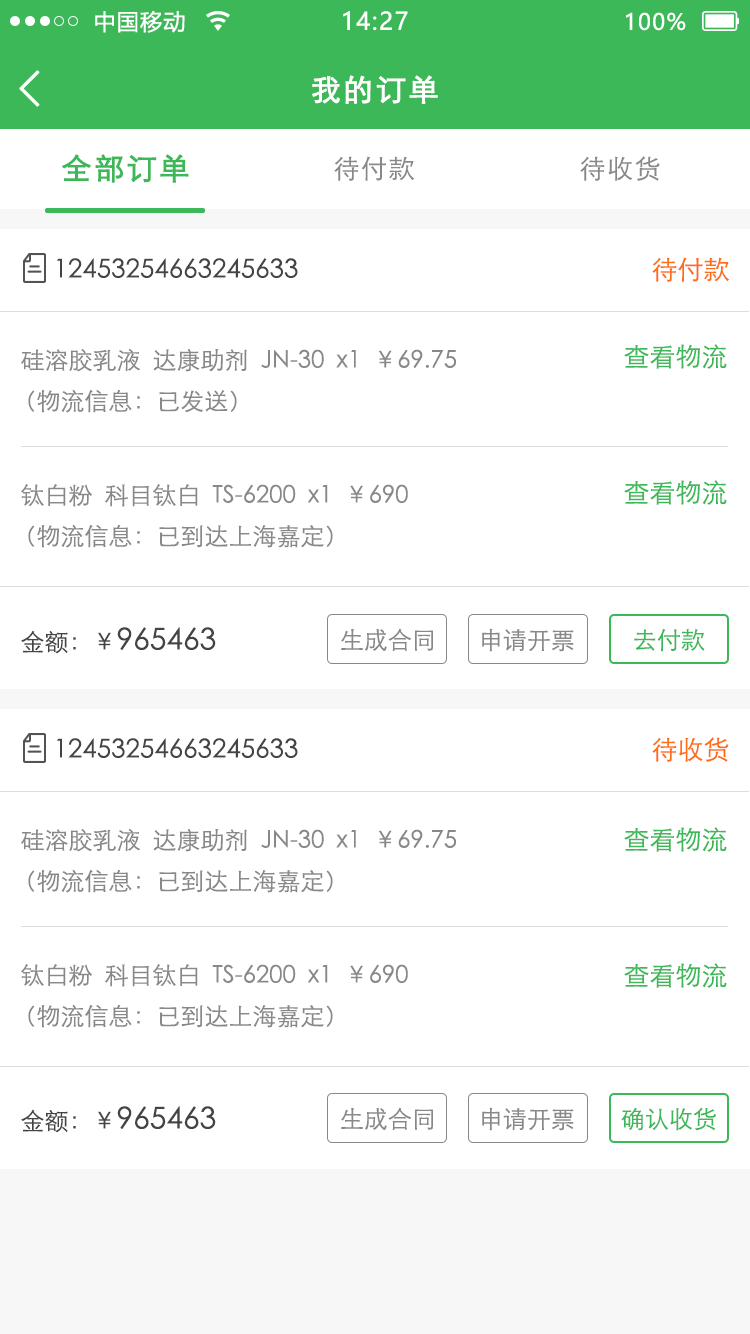
<style>
.page{position:relative;width:750px;height:1334px;background:#ffffff}
.page>*{position:absolute;margin:0}
.t1{font:22px "MicrosoftYaHei";letter-spacing:0.06em;color:#ffffff}
.t2{font:24px "MicrosoftYaHei";letter-spacing:0.06em;color:#ffffff}
.t3{font:49.8px "NSimSun";letter-spacing:0.06em;color:#fefffe;font-weight:bold}
.t4{font:30px "STXihei";letter-spacing:0.06em;color:#fefffe;font-weight:bold}
.t5{font:30px "STXihei";letter-spacing:0.06em;color:#3db858;font-weight:bold}
.t6{font:26px "STXihei";letter-spacing:0.06em;color:#888888}
.t7{font:26px "STXihei";color:#ff6e17}
.t8{font:26px "STXihei";color:#444444}
.t9{font:24px "STXihei";color:#888888}
.t10{font:26px "STXihei";color:#3db858}
.t11{font:30px "STXihei";color:#444444}
.t12{font:24px "STXihei";color:#444444}
.t13{font:24px "STXihei";color:#3db858}
</style>
<div class="page">
<p class="t1" style="left:95px;top:10px;width:90px;height:23px">中国移动</p>
<p class="t2" style="left:343px;top:11px;width:65px;height:20px">14:27</p>
<p class="t1" style="left:626px;top:12px;width:60px;height:19px">100%</p>
<p class="t3" style="left:19px;top:70px;width:21px;height:37px">&lt;</p>
<p class="t4" style="left:312px;top:75px;width:126px;height:29px">我的订单</p>
<p class="t5" style="left:62px;top:154px;width:127px;height:29px">全部订单</p>
<p class="t6" style="left:334px;top:156px;width:80px;height:25px">待付款</p>
<p class="t6" style="left:580px;top:156px;width:80px;height:25px">待收货</p>
<p class="t7" style="left:652px;top:257px;width:77px;height:25px">待付款</p>
<p class="t8" style="left:57px;top:258px;width:241px;height:20px">12453254663245633</p>
<p class="t9" style="left:21px;top:348px;width:435px;height:24px">硅溶胶乳液  达康助剂  JN-30  x1  ￥69.75</p>
<p class="t10" style="left:624px;top:344px;width:103px;height:25px">查看物流</p>
<p class="t9" style="left:28px;top:389px;width:209px;height:24px">（物流信息：已发送）</p>
<p class="t9" style="left:21px;top:484px;width:387px;height:23px">钛白粉  科目钛白  TS-6200  x1  ￥690</p>
<p class="t10" style="left:624px;top:480px;width:103px;height:25px">查看物流</p>
<p class="t9" style="left:28px;top:524px;width:305px;height:24px">（物流信息：已到达上海嘉定）</p>
<p class="t11" style="left:21px;top:627px;width:195px;height:27px"><span class="t12">金额：￥</span>965463</p>
<p class="t9" style="left:341px;top:628px;width:92px;height:23px">生成合同</p>
<p class="t9" style="left:482px;top:628px;width:92px;height:24px">申请开票</p>
<p class="t13" style="left:634px;top:629px;width:71px;height:23px">去付款</p>
<p class="t7" style="left:652px;top:737px;width:77px;height:25px">待收货</p>
<p class="t8" style="left:57px;top:738px;width:241px;height:20px">12453254663245633</p>
<p class="t9" style="left:21px;top:828px;width:435px;height:24px">硅溶胶乳液  达康助剂  JN-30  x1  ￥69.75</p>
<p class="t10" style="left:624px;top:827px;width:103px;height:25px">查看物流</p>
<p class="t9" style="left:28px;top:869px;width:305px;height:24px">（物流信息：已到达上海嘉定）</p>
<p class="t9" style="left:21px;top:964px;width:387px;height:23px">钛白粉  科目钛白  TS-6200  x1  ￥690</p>
<p class="t10" style="left:624px;top:963px;width:103px;height:25px">查看物流</p>
<p class="t9" style="left:28px;top:1004px;width:305px;height:24px">（物流信息：已到达上海嘉定）</p>
<p class="t11" style="left:21px;top:1106px;width:195px;height:27px"><span class="t12">金额：￥</span>965463</p>
<p class="t9" style="left:341px;top:1107px;width:92px;height:23px">生成合同</p>
<p class="t9" style="left:482px;top:1107px;width:92px;height:24px">申请开票</p>
<p class="t13" style="left:621px;top:1107px;width:95px;height:24px">确认收货</p>
</div>
